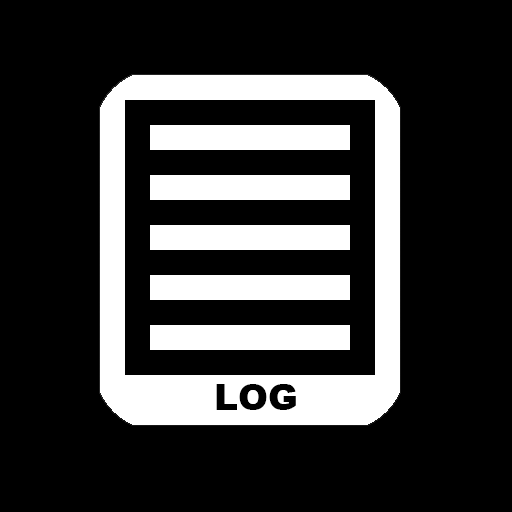
<style>
.page{position:relative;width:512px;height:512px;background:#000000}
.page>*{position:absolute;margin:0}
.t1{font:36px "Arial-Black";color:#000000}
</style>
<div class="page">
<p class="t1" style="left:216px;top:384px;width:80px;height:26px">LOG</p>
</div>
